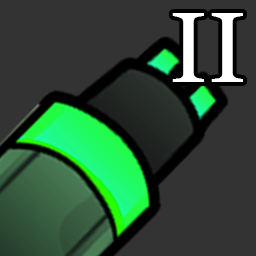
<style>
.page{position:relative;width:256px;height:256px;background:#333333}
.page>*{position:absolute;margin:0}
.t1{font:100px "Georgia";color:#ffffff}
</style>
<div class="page">
<p class="t1" style="left:172px;top:13px;width:71px;height:69px">II</p>
</div>
